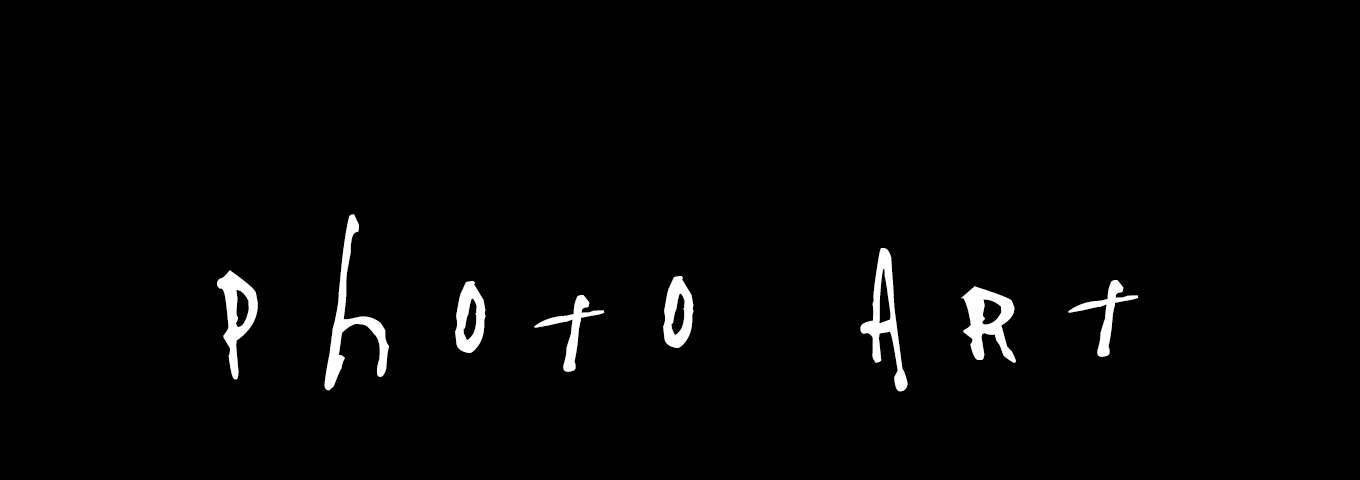
<style>
.page{position:relative;width:1360px;height:480px;background:#000000}
.page>*{position:absolute;margin:0}
.t1{font:340.5px "Pappo'sBluesBandOfficialFont";letter-spacing:0.15em;color:#ffffff;scale:1.12 1}
</style>
<div class="page">
<p class="t1" style="left:217px;top:214px;width:922px;height:178px;rotate:-2deg">photo art</p>
</div>
